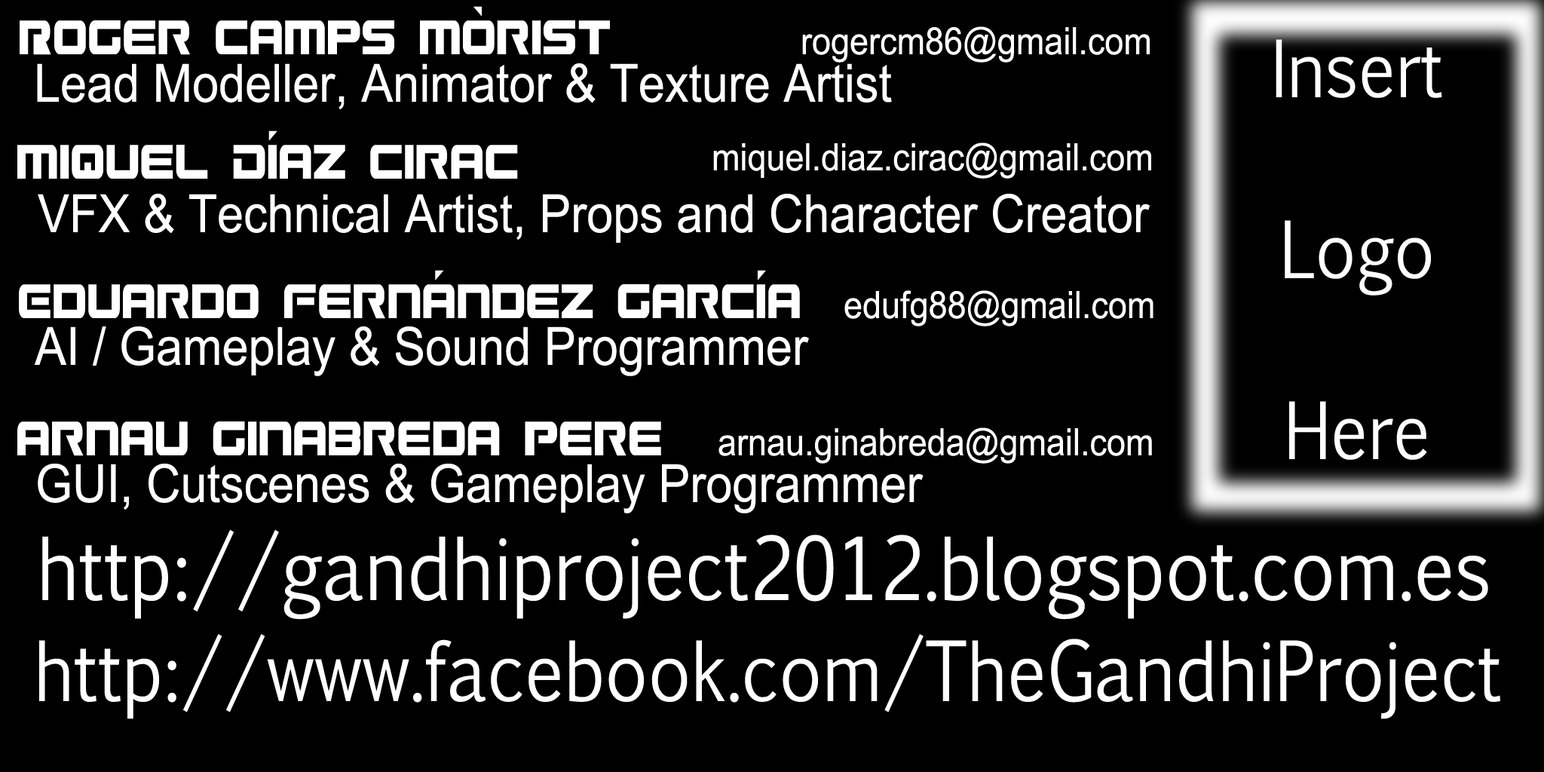
<style>
.page{position:relative;width:1544px;height:772px;background:#000000}
.page>*{position:absolute;margin:0}
.t1{font:52.8px "GunshipCondensed";color:#ffffff;scale:0.9 1}
.t2{font:37.7px "ArialMT";color:#ffffff;scale:0.9 1}
.t3{font:75.4px "EuphemiaCAS";color:#fffefe;scale:0.9 1}
.t4{font:52.8px "ArialMT";color:#ffffff;scale:0.9 1}
.t5{font:82.9px "EuphemiaCAS";color:#ffffff;scale:0.9 1}
.t6{font:79.2px "EuphemiaCAS";color:#ffffff;scale:0.9 1}
</style>
<div class="page">
<p class="t1" style="left:20px;top:6px;width:590px;height:49px">Roger Camps Mòrist</p>
<p class="t2" style="left:802px;top:26px;width:348px;height:37px">rogercm86@gmail.com</p>
<p class="t3" style="left:1276px;top:39px;width:167px;height:421px;text-align:center">Insert<br><br>Logo<br><br>Here</p>
<p class="t4" style="left:37px;top:63px;width:855px;height:46px">Lead Modeller, Animator &amp; Texture Artist</p>
<p class="t1" style="left:17px;top:130px;width:501px;height:49px">MiQuel DíaZ Cirac</p>
<p class="t2" style="left:713px;top:143px;width:438px;height:36px">miquel.diaz.cirac@gmail.com</p>
<p class="t4" style="left:38px;top:194px;width:1112px;height:49px">VFX &amp; Technical Artist, Props and Character Creator</p>
<p class="t1" style="left:19px;top:270px;width:781px;height:49px">Eduardo FernándeZ García</p>
<p class="t2" style="left:845px;top:290px;width:309px;height:37px">edufg88@gmail.com</p>
<p class="t4" style="left:34px;top:327px;width:775px;height:49px">AI / Gameplay &amp; Sound Programmer</p>
<p class="t1" style="left:17px;top:422px;width:644px;height:34px">Arnau Ginabreda Pere</p>
<p class="t2" style="left:719px;top:428px;width:433px;height:36px">arnau.ginabreda@gmail.com</p>
<p class="t4" style="left:38px;top:464px;width:886px;height:50px">GUI, Cutscenes &amp; Gameplay Programmer</p>
<p class="t5" style="left:42px;top:529px;width:1447px;height:91px">http://gandhiproject2012.blogspot.com.es</p>
<p class="t6" style="left:39px;top:634px;width:1462px;height:85px">http://www.facebook.com/TheGandhiProject</p>
</div>
